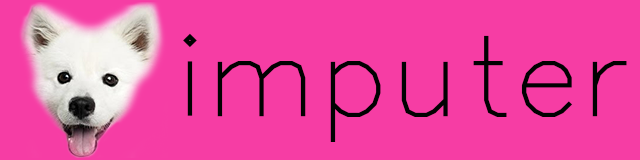
<style>
.page{position:relative;width:640px;height:160px;background:#f63da4}
.page>*{position:absolute;margin:0}
.t1{font:108.8px "Simplex_IV25";color:#020202}
</style>
<div class="page">
<p class="t1" style="left:183px;top:33px;width:444px;height:109px">imputer</p>
</div>
